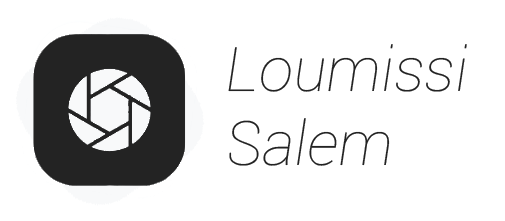
<style>
.page{position:relative;width:505px;height:221px;background:#ffffff}
.page>*{position:absolute;margin:0}
.t1{font:61.4px "Roboto-ThinItalic";color:#232323}
</style>
<div class="page">
<p class="t1" style="left:228px;top:44px;width:239px;height:122px">Loumissi<br>Salem</p>
</div>
